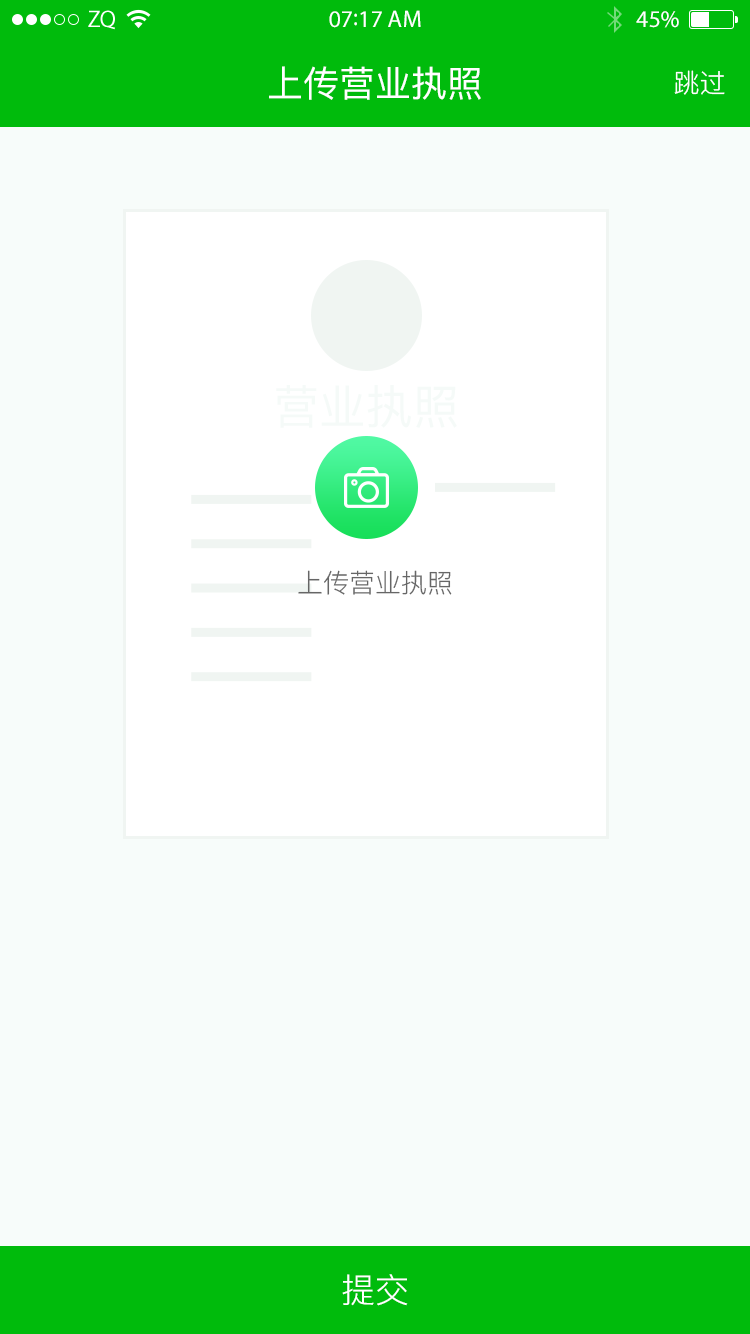
<style>
.page{position:relative;width:750px;height:1334px;background:#f7fcfa}
.page>*{position:absolute;margin:0}
.t1{font:24px "MyriadPro-Regular";color:#ffffff}
.t2{font:36px "PingFang-SC-Medium";color:#ffffff}
.t3{font:26px "PingFang-SC-Regular";color:#ffffff}
.t4{font:46.6px "PingFang-SC-Medium";color:#f5faf8}
.t5{font:26px "PingFang-SC-Regular";color:#666666}
.t6{font:34px "PingFang-SC-Regular";color:#ffffff}
</style>
<div class="page">
<p class="t1" style="left:329px;top:10px;width:92px;height:18px">07:17 AM</p>
<p class="t1" style="left:636px;top:11px;width:43px;height:17px">45%</p>
<p class="t2" style="left:269px;top:66px;width:212px;height:34px">上传营业执照</p>
<p class="t3" style="left:674px;top:70px;width:51px;height:25px">跳过</p>
<p class="t4" style="left:276px;top:385px;width:181px;height:43px">营业执照</p>
<p class="t5" style="left:298px;top:570px;width:154px;height:25px">上传营业执照</p>
<p class="t6" style="left:342px;top:1274px;width:66px;height:32px">提交</p>
</div>
